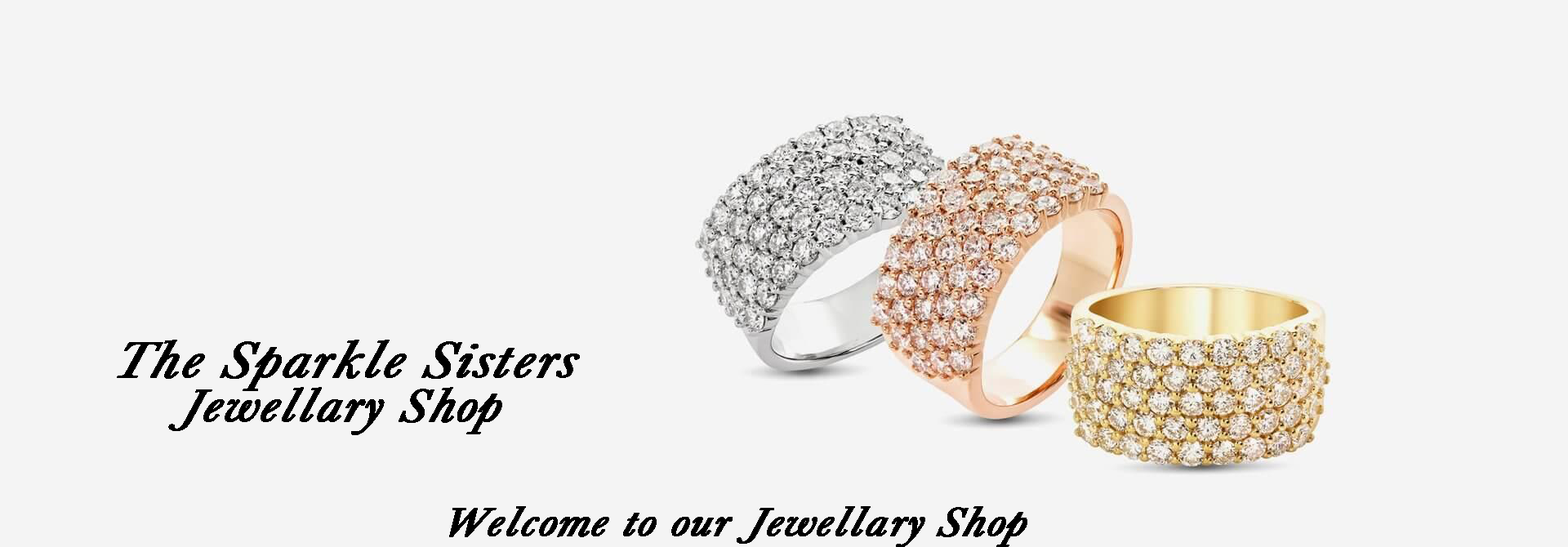
<style>
.page{position:relative;width:1568px;height:547px;background:#f4f4f4}
.page>*{position:absolute;margin:0}
.t1{font:53.4px "Baskerville";color:#000000;font-weight:bold;font-style:italic;scale:1.11 1}
.t2{font:48.1px "Baskerville";color:#000000;font-weight:bold;font-style:italic;scale:1.11 1}
.t3{font:41.9px "Baskerville";color:#000000;font-weight:bold;font-style:italic;scale:1.11 1}
</style>
<div class="page">
<p class="t1" style="left:117px;top:340px;width:463px;height:51px">The Sparkle Sisters</p>
<p class="t2" style="left:168px;top:387px;width:334px;height:48px">Jewellary Shop</p>
<p class="t3" style="left:449px;top:506px;width:578px;height:42px">Welcome to our Jewellary Shop</p>
</div>
